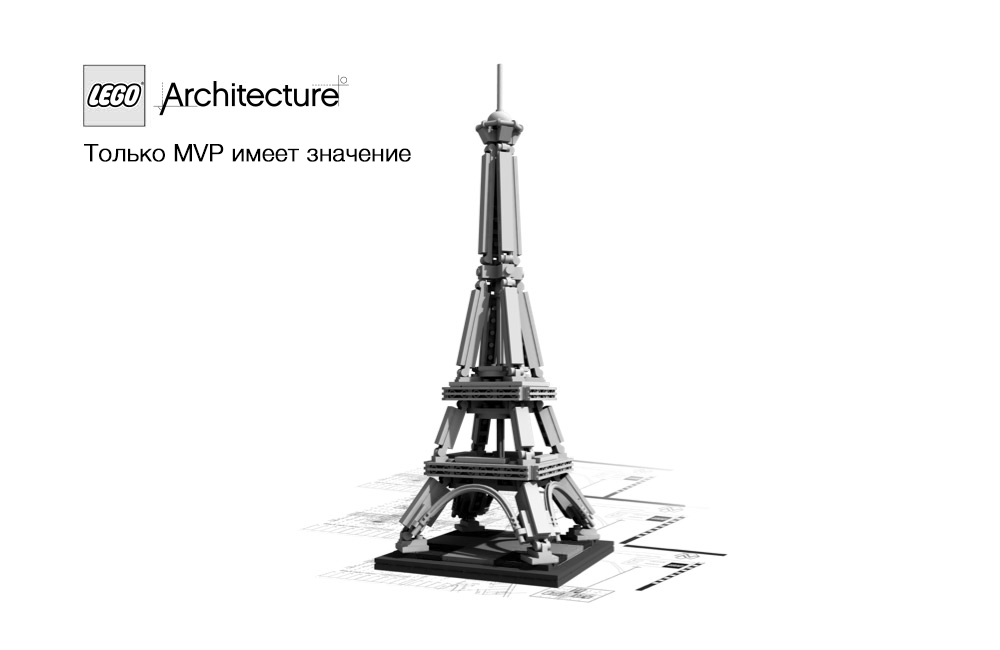
<style>
.page{position:relative;width:1000px;height:650px;background:#ffffff}
.page>*{position:absolute;margin:0}
.t1{font:24px "HelveticaNeue-Light";color:#010101;font-weight:bold}
</style>
<div class="page">
<p class="t1" style="left:84px;top:144px;width:327px;height:18px">Только MVP имеет значение</p>
</div>
